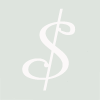
<style>
.page{position:relative;width:100px;height:100px;background:#dee4de}
.page>*{position:absolute;margin:0}
.t1{font:132px "AYummyApology";color:#fbf8f8}
</style>
<div class="page">
<p class="t1" style="left:22px;top:8px;width:54px;height:83px">$</p>
</div>
